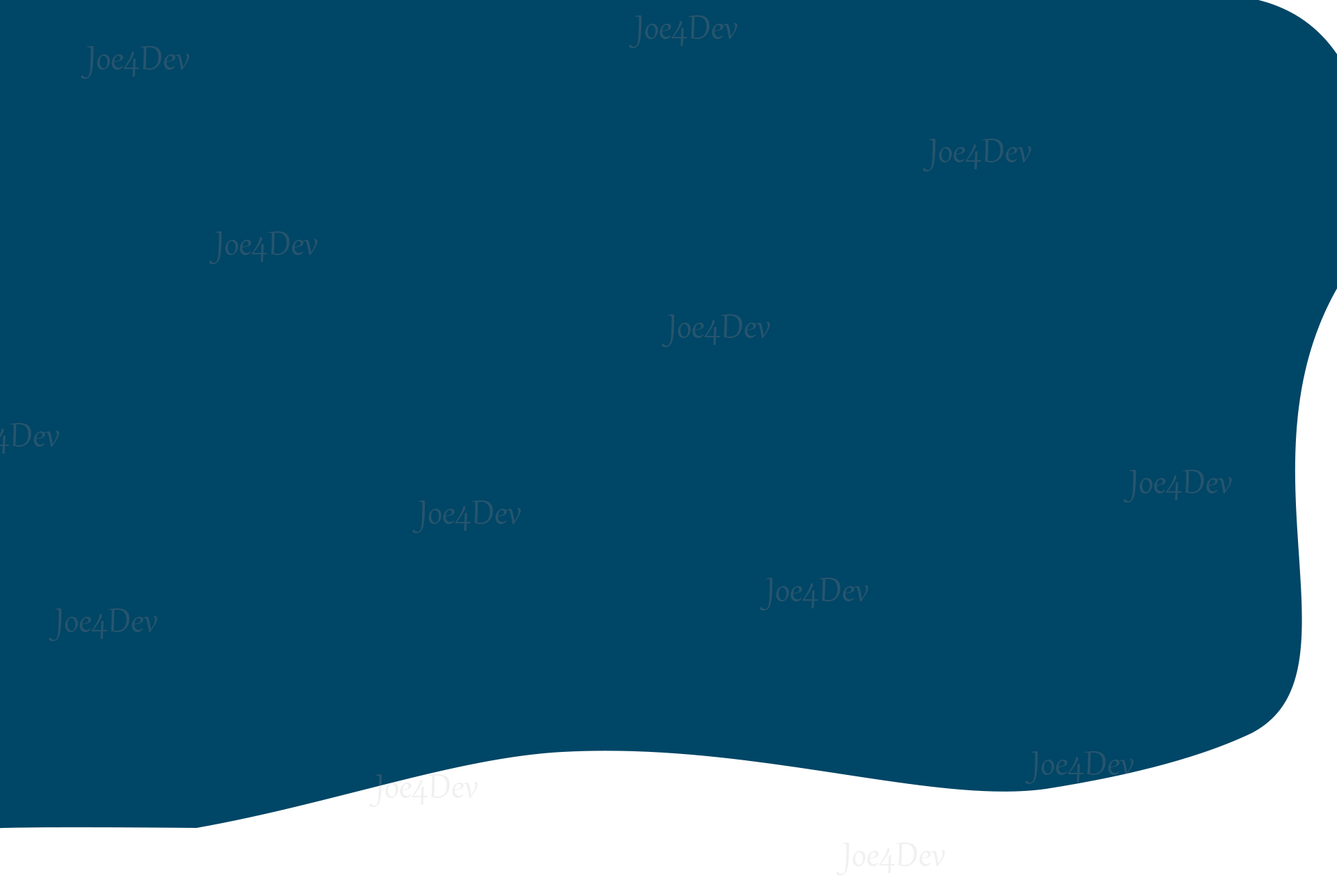
<style>
.page{position:relative;width:1337px;height:892px;background:#004666}
.page>*{position:absolute;margin:0}
.t1{font:41.8px "Gabriola";color:#27556e}
.t2{font:41.8px "Gabriola";color:#f0f0f0}
</style>
<div class="page">
<p class="t1" style="left:629px;top:15px;width:109px;height:33px">Joe4Dev</p>
<p class="t1" style="left:81px;top:46px;width:108px;height:33px">Joe4Dev</p>
<p class="t1" style="left:923px;top:139px;width:109px;height:32px">Joe4Dev</p>
<p class="t1" style="left:209px;top:231px;width:109px;height:33px">Joe4Dev</p>
<p class="t1" style="left:662px;top:314px;width:108px;height:33px">Joe4Dev</p>
<p class="t1" style="left:1124px;top:469px;width:108px;height:33px">Joe4Dev</p>
<p class="t1" style="left:412px;top:500px;width:109px;height:33px">Joe4Dev</p>
<p class="t1" style="left:760px;top:577px;width:109px;height:33px">Joe4Dev</p>
<p class="t1" style="left:49px;top:608px;width:108px;height:33px">Joe4Dev</p>
<p class="t2" style="left:837px;top:842px;width:108px;height:33px">Joe4Dev</p>
</div>
